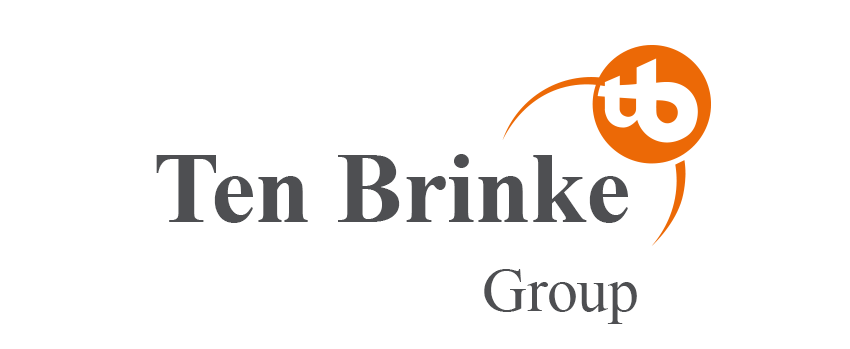
<style>
.page{position:relative;width:850px;height:349px;background:#ffffff}
.page>*{position:absolute;margin:0}
.t1{font:100px "TimesNewRomanPS-BoldMT";color:#4e4f52}
.t2{font:62.5px "TimesNewRomanPSMT";letter-spacing:-0.01em;color:#4e4f52}
</style>
<div class="page">
<p class="t1" style="left:156px;top:154px;width:472px;height:69px">Ten Brinke</p>
<p class="t2" style="left:484px;top:269px;width:153px;height:55px">Group</p>
</div>
